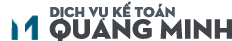
<style>
.page{position:relative;width:232px;height:41px;background:#ffffff}
.page>*{position:absolute;margin:0}
.t1{font:14.5px "UTM-Neutra";color:#4e5764;text-transform:uppercase}
.t2{font:28.1px "UTM-Neutra";color:#41454a;text-transform:uppercase}
</style>
<div class="page">
<p class="t1" style="left:50px;top:1px;width:125px;height:20px">Dịch vụ kế toán</p>
<p class="t2" style="left:49px;top:18px;width:183px;height:24px">Quang Minh</p>
</div>
